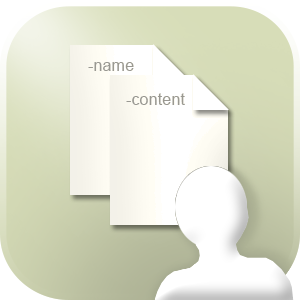
<style>
.page{position:relative;width:300px;height:300px}
.page>*{position:absolute;margin:0}
.t1{font:16.1px "ArialMT";color:#989898}
</style>
<div class="page">
<p class="t1" style="left:88px;top:62px;width:46px;height:9px">-name</p>
<p class="t1" style="left:126px;top:93px;width:59px;height:12px">-content</p>
</div>
